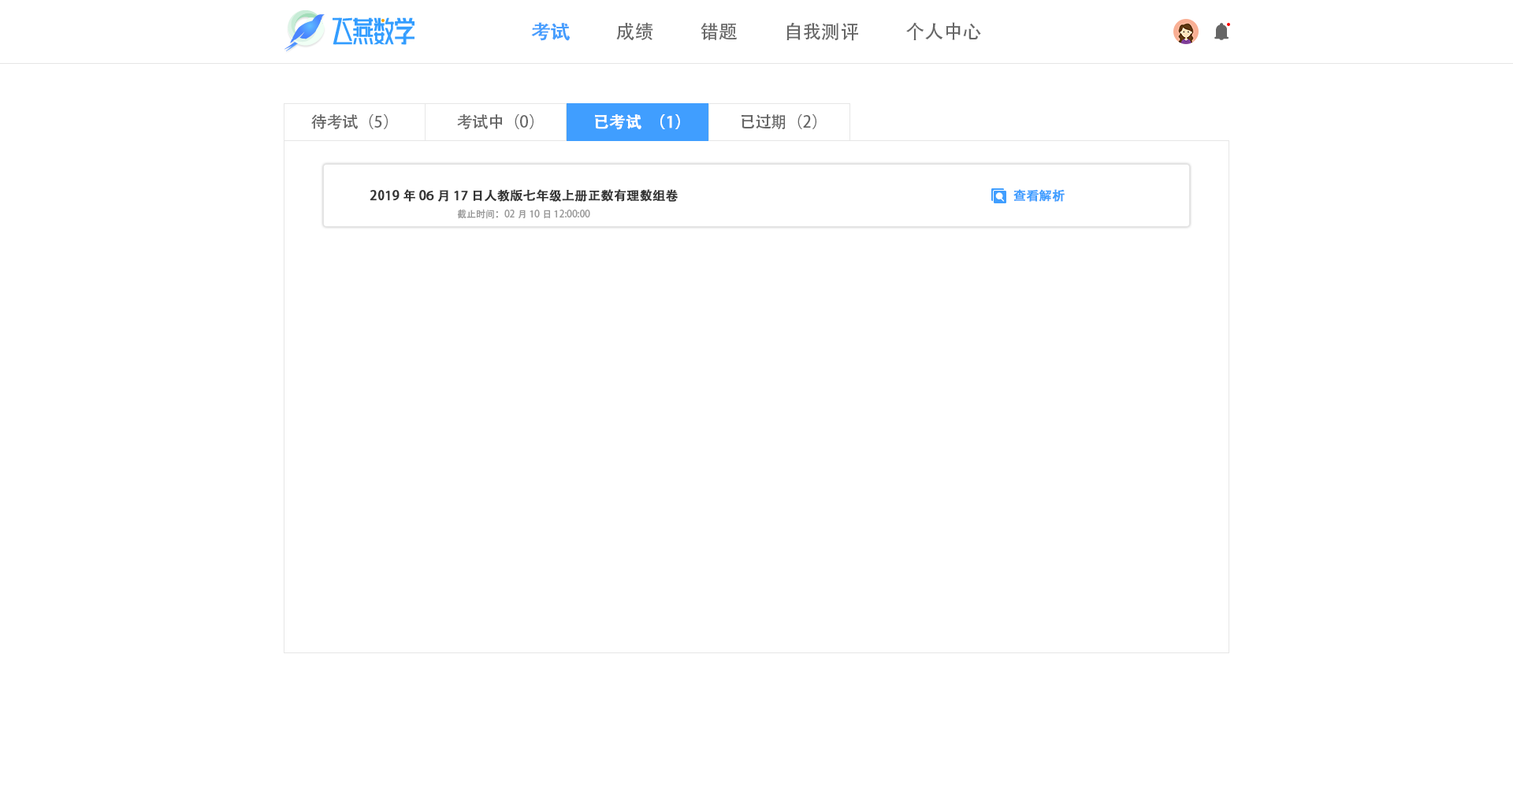
<style>
.page{position:relative;width:1513px;height:788px;background:#ffffff}
.page>*{position:absolute;margin:0}
.t1{font:18.9px "AdobeHeitiStd-Regular";color:#459dfd;font-weight:bold}
.t2{font:18.9px "AdobeHeitiStd-Regular";color:#666666}
.t3{font:15.8px "AdobeHeitiStd-Regular";color:#666666}
.t4{font:15.8px "AdobeHeitiStd-Regular";color:#ffffff;font-weight:bold}
.t5{font:12.6px "AdobeHeitiStd-Regular";color:#333333;font-weight:bold}
.t6{font:12.6px "AdobeHeitiStd-Regular";color:#409eff;font-weight:bold}
.t7{font:9.5px "AdobeHeitiStd-Regular";color:#999999}
</style>
<div class="page">
<p class="t1" style="left:531px;top:22px;width:39px;height:19px">考试</p>
<p class="t2" style="left:616px;top:22px;width:37px;height:18px">成绩</p>
<p class="t2" style="left:701px;top:23px;width:36px;height:17px">错题</p>
<p class="t2" style="left:786px;top:22px;width:72px;height:19px">自我测评</p>
<p class="t2" style="left:906px;top:22px;width:75px;height:18px">个人中心</p>
<p class="t3" style="left:311px;top:114px;width:77px;height:15px">待考试（5）</p>
<p class="t3" style="left:457px;top:114px;width:77px;height:15px">考试中（0）</p>
<p class="t4" style="left:595px;top:114px;width:85px;height:16px">已考试（1）</p>
<p class="t3" style="left:742px;top:114px;width:74px;height:15px">已过期（2）</p>
<p class="t5" style="left:370px;top:189px;width:309px;height:13px">2019年06月17日人教版七年级上册正数有理数组卷</p>
<p class="t6" style="left:1013px;top:189px;width:52px;height:13px">查看解析</p>
<p class="t7" style="left:457px;top:209px;width:133px;height:10px">截止时间：02月10日 12:00:00</p>
</div>
